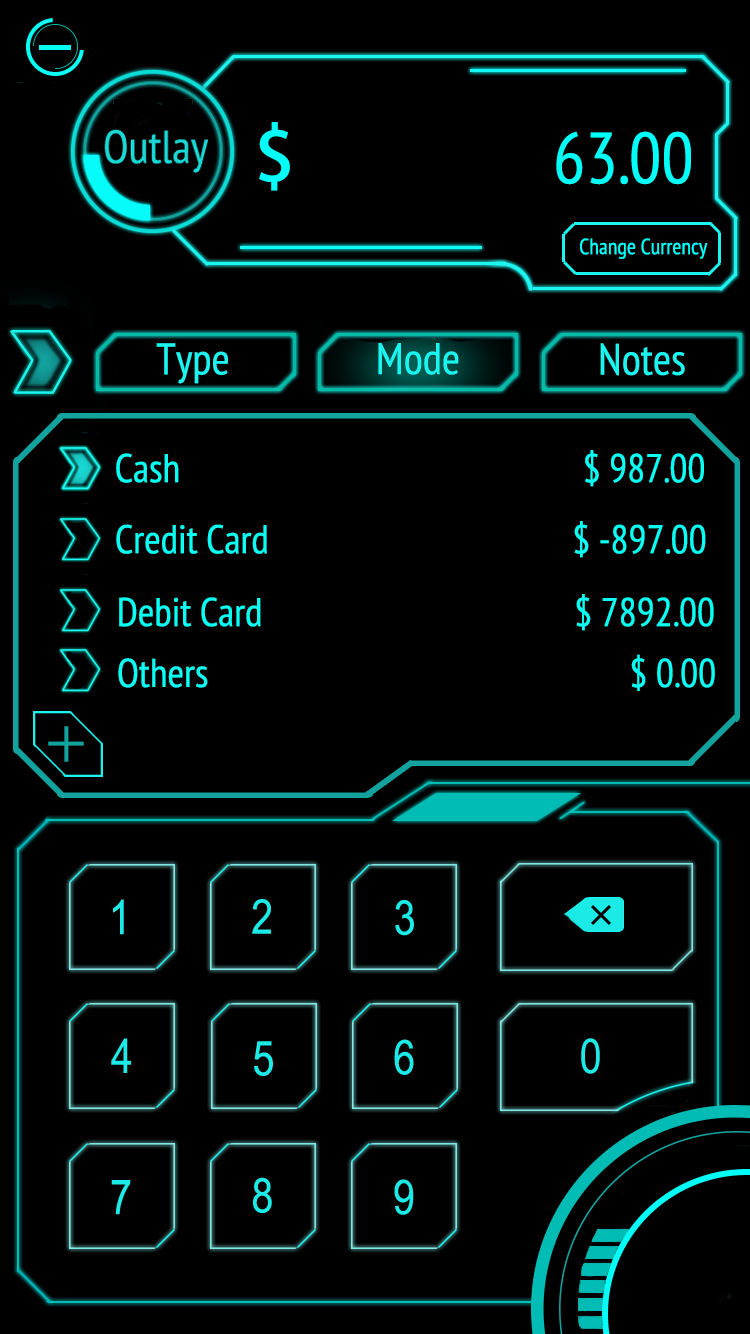
<style>
.page{position:relative;width:750px;height:1334px;background:#000000}
.page>*{position:absolute;margin:0}
.t1{font:72px "PTSans-Narrow";color:#00fff8}
.t2{font:72px "AdobeHeitiStd-Regular";color:#00fff8}
.t3{font:22px "PTSans-Narrow";color:#00fff8}
.t4{font:44px "PTSans-Narrow";color:#1cf4ef}
.t5{font:40px "PTSans-Narrow";color:#0afef3}
</style>
<div class="page">
<p class="t1" style="left:259px;top:122px;width:432px;height:69px"><span class="t2">$                </span>63.00</p>
<p class="t3" style="left:580px;top:238px;width:128px;height:21px">Change Currency</p>
<p class="t4" style="left:156px;top:343px;width:72px;height:41px">Type</p>
<p class="t4" style="left:378px;top:343px;width:81px;height:32px">Mode</p>
<p class="t4" style="left:600px;top:343px;width:85px;height:33px">Notes</p>
<p class="t5" style="left:116px;top:450px;width:588px;height:37px">Cash            $ 987.00</p>
<p class="t5" style="left:116px;top:521px;width:590px;height:37px">Credit Card           $ -897.00</p>
<p class="t5" style="left:119px;top:594px;width:595px;height:37px">Debit Card           $ 7892.00</p>
<p class="t5" style="left:118px;top:654px;width:597px;height:37px">Others             $ 0.00</p>
</div>
